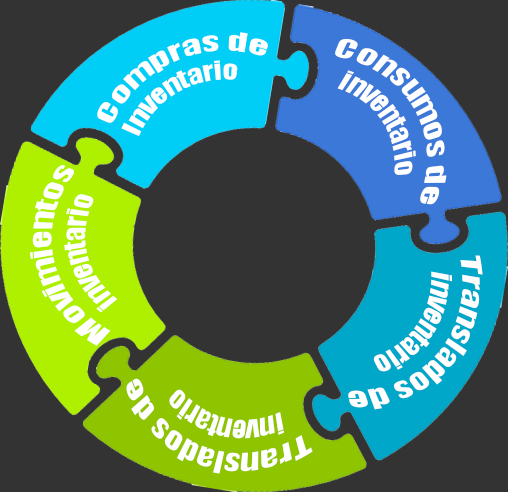
<style>
.page{position:relative;width:508px;height:492px;background:#333333}
.page>*{position:absolute;margin:0}
.t1{font:24px "Impact";color:#ffffff}
.t2{font:28.2px "Impact";color:#ffffff;scale:0.79 1}
</style>
<div class="page">
<p class="t1" style="left:97px;top:32px;width:171px;height:104px;rotate:-22deg">Compras de <br>Inventario</p>
<p class="t2" style="left:335px;top:38px;width:112px;height:167px;rotate:60deg">Consumos de<br>   inventario</p>
<p class="t2" style="left:30px;top:165px;width:88px;height:181px;rotate:-100deg">Movimientos <br>   inventario</p>
<p class="t2" style="left:348px;top:255px;width:135px;height:155px;rotate:130deg">Translados de<br>   inventario</p>
<p class="t2" style="left:126px;top:378px;width:187px;height:96px;rotate:-161deg">Translados de<br>   inventario</p>
</div>
